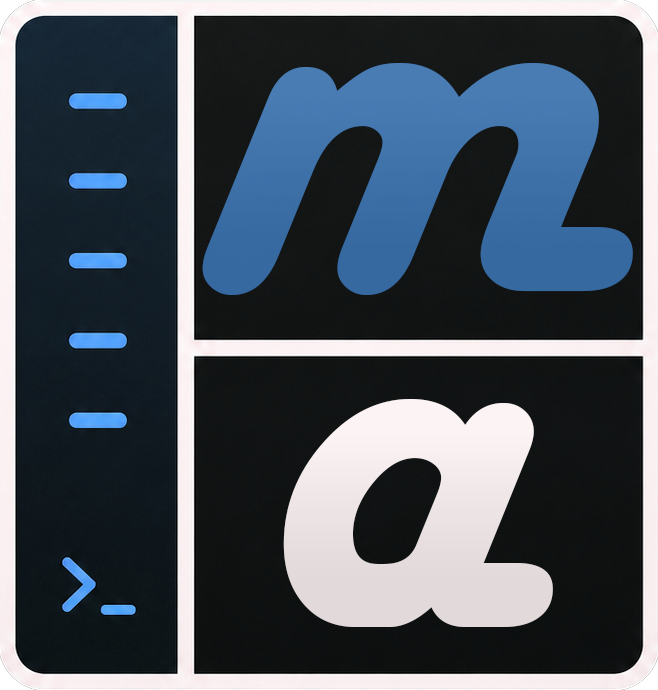
<style>
.page{position:relative;width:658px;height:690px}
.page>*{position:absolute;margin:0}
.t1{font:600px "HarlowSolid";color:#3e71a9}
.t2{font:600px "HarlowSolid";color:#fbf2f3}
</style>
<div class="page">
<p class="t1" style="left:202px;top:63px;width:431px;height:232px">m</p>
<p class="t2" style="left:283px;top:399px;width:270px;height:228px">a</p>
</div>
